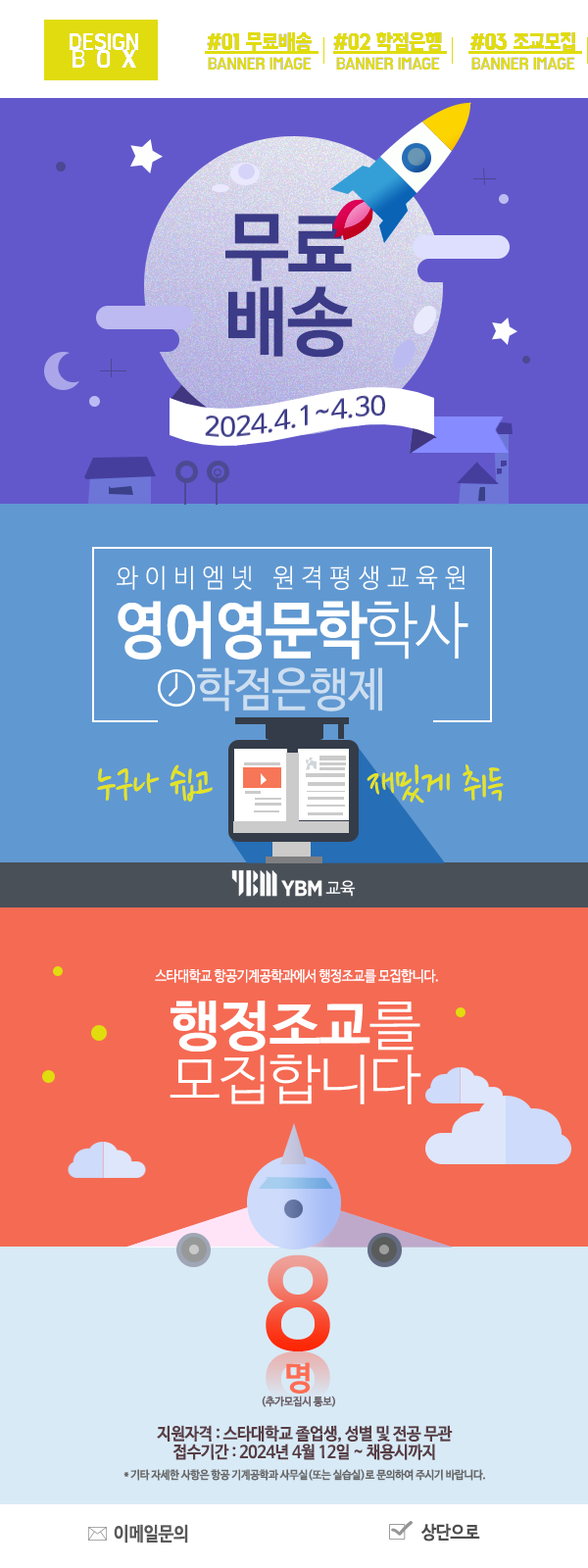
<style>
.page{position:relative;width:588px;height:1568px}
.page>*{position:absolute;margin:0}
.t1{font:23.5px/17.6px "BMHANNAPro";letter-spacing:-0.025em;color:#ffffff;scale:0.9 1}
.t2{font:25.5px/17.6px "BMHANNAPro";letter-spacing:0.455em;color:#ffffff;scale:0.9 1}
.t3{font:16.5px/20.2px "BMHANNAPro";letter-spacing:-0.025em;color:#e1dc0f;scale:0.9 1}
.t4{font:22px/16.5px "BMHANNAPro";letter-spacing:-0.025em;color:#e1dc0f;scale:0.9 1}
.t5{font:75.2px/125.3px "NanumBarunGothicBold";letter-spacing:-0.025em;color:#3c3b87}
.t6{font:75.2px/75.2px "NanumBarunGothicBold";letter-spacing:-0.025em;color:#3c3b87}
.t7{font:48.4px "NanumPen";letter-spacing:-0.025em;color:#e3e326;scale:0.89 1}
.t8{font:48px "NanumPen";letter-spacing:-0.025em;color:#e3e326;scale:0.9 1}
.t9{font:14.5px "NanumBarunGothic";letter-spacing:-0.025em;color:#ffffff;scale:0.9 1}
.t10{font:54.2px/54.2px "NanumBarunGothicLight";letter-spacing:-0.025em;color:#ffffff;scale:1.06 1}
.t11{font:54.2px/101.7px "NanumBarunGothicBold";letter-spacing:-0.025em;color:#ffffff;scale:1.06 1}
.t12{font:121px "NanumBarunGothicBold";letter-spacing:-0.025em}
.t13{font:10.9px/16.4px "NanumBarunGothicBold";letter-spacing:-0.025em;color:#6d6067;scale:0.97 1}
.t14{font:32.8px/27.4px "NanumBarunGothicBold";letter-spacing:-0.025em;color:#fd6d53;scale:0.97 1}
.t15{font:11.3px/21.1px "NanumBarunGothicBold";letter-spacing:-0.025em;color:#686868;scale:0.95 1}
.t16{font:16.9px/15.5px "NanumBarunGothicBold";letter-spacing:-0.025em;color:#583d44;scale:0.95 1}
.t17{font:16.9px/18.3px "NanumBarunGothicBold";letter-spacing:-0.025em;color:#583d44;scale:0.95 1}
.t18{font:19.2px "NanumBarunGothicBold";letter-spacing:-0.025em;color:#595959;scale:0.9 1}
.t19{font:18.3px "NanumBarunGothicBold";letter-spacing:-0.025em;color:#4e4e4e;scale:0.91 1}
</style>
<div class="page">
<p class="t1" style="left:69px;top:32px;width:70px;height:37px;text-align:center">DESIGN<br><span class="t2">BOX</span></p>
<p class="t3" style="left:207px;top:32px;width:105px;height:38px;text-align:center"><span class="t4">#01 무료배송<br></span>BANNER IMAGE</p>
<p class="t3" style="left:333px;top:32px;width:109px;height:38px;text-align:center"><span class="t4">#02 학점은행<br></span>BANNER IMAGE</p>
<p class="t3" style="left:470px;top:32px;width:105px;height:38px;text-align:center"><span class="t4">#03 조교모집<br></span>BANNER IMAGE</p>
<p class="t5" style="left:225px;top:214px;width:128px;height:144px;text-align:center">무료<br><span class="t6">배송</span></p>
<p class="t7" style="left:97px;top:764px;width:116px;height:38px">누구나 쉽고</p>
<p class="t8" style="left:367px;top:764px;width:137px;height:40px">재밌게 취득</p>
<p class="t9" style="left:155px;top:969px;width:283px;height:14px">스타대학교 항공기계공학과에서 행정조교를 모집합니다.</p>
<p class="t10" style="left:170px;top:1001px;width:251px;height:103px;text-align:center"><span class="t11">행정조교</span>를<br>모집합니다</p>
<p class="t12" style="left:266px;top:1254px;width:64px;height:97px">8</p>
<p class="t13" style="left:262px;top:1362px;width:73px;height:45px;text-align:center"><span class="t14">명<br></span>(추가모집시 통보)</p>
<p class="t15" style="left:123px;top:1425px;width:362px;height:56px;text-align:center"><span class="t16">지원자격 : 스타대학교 졸업생, 성별 및 전공 무관<br></span><span class="t17">접수기간 : 2024년 4월 12일 ~ 채용시까지<br></span>* 기타 자세한 사항은 항공 기계공학과 사무실(또는 실습실)로 문의하여 주시기 바랍니다.</p>
<p class="t18" style="left:114px;top:1524px;width:74px;height:20px">이메일문의</p>
<p class="t19" style="left:420px;top:1523px;width:60px;height:19px">상단으로</p>
</div>
